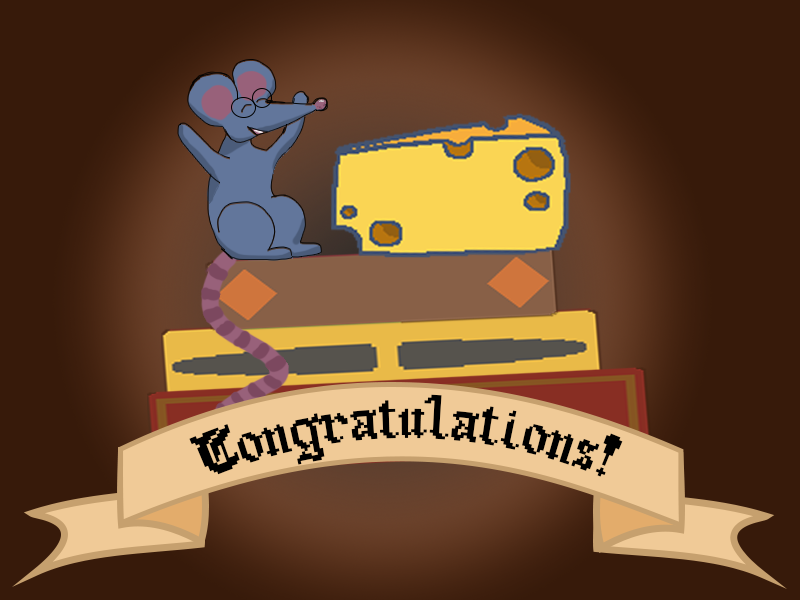
<style>
.page{position:relative;width:800px;height:600px;background:#371a0a}
.page>*{position:absolute;margin:0}
.t1{font:29.2px "Old-English-Gothic-Pixel";color:#000000}
</style>
<div class="page">
<p class="t1" style="left:189px;top:394px;width:434px;height:83px">Congratulations!</p>
</div>
